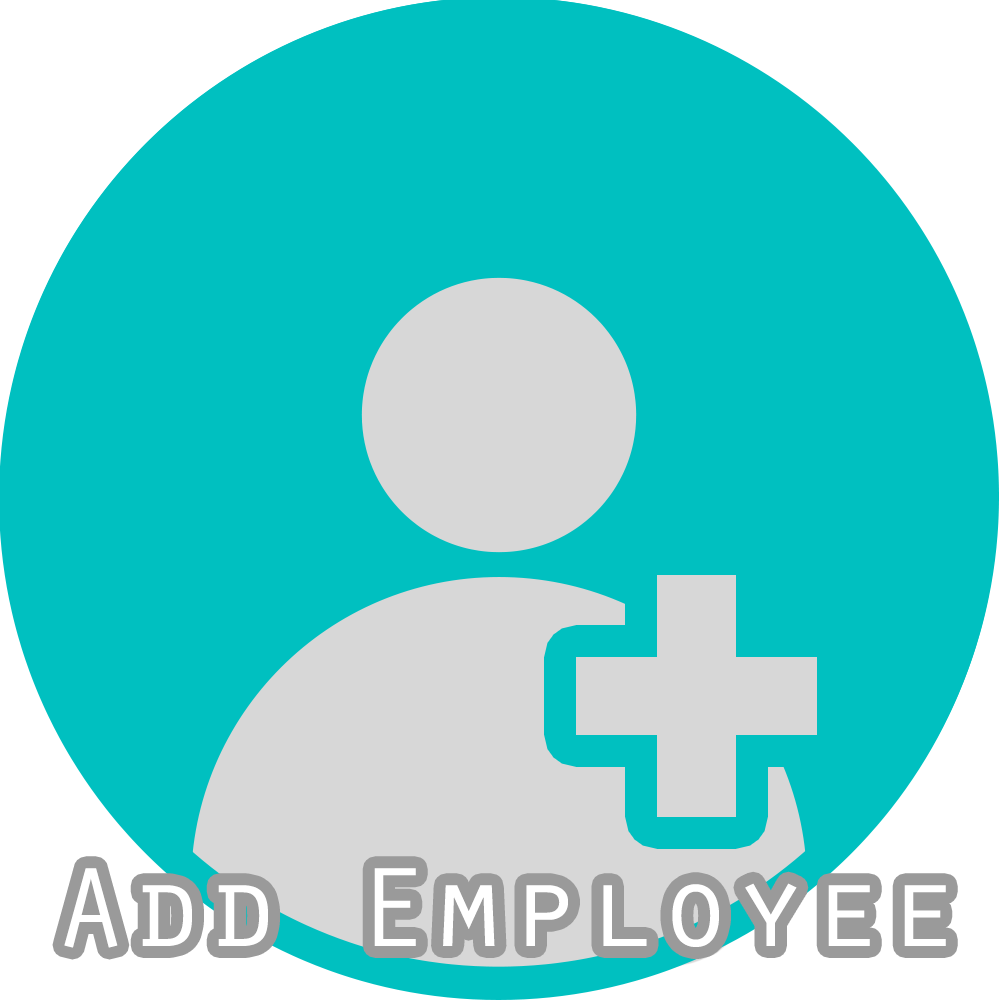
<style>
.page{position:relative;width:1000px;height:1000px;background:#00c0c0}
.page>*{position:absolute;margin:0}
.t1{font:116.7px "OratorStd";color:#ffffff;scale:1.08 1}
</style>
<div class="page">
<p class="t1" style="left:64px;top:868px;width:882px;height:80px">Add Employee</p>
</div>
